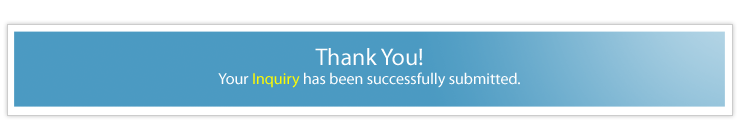
<style>
.page{position:relative;width:740px;height:140px;background:#ffffff}
.page>*{position:absolute;margin:0}
.t1{font:16px "MyriadPro-Regular";color:#fefefe}
.t2{font:24px "MyriadPro-Regular";color:#fefefe}
.t3{font:16px "MyriadPro-Regular";color:#fefb03}
</style>
<div class="page">
<p class="t1" style="left:218px;top:48px;width:302px;height:40px;text-align:center"><span class="t2">Thank You!<br></span>Your <span class="t3">Inquiry</span> has been successfully submitted.</p>
</div>
